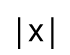
<style>
.page{position:relative;width:70px;height:55px;background:#ffffff}
.page>*{position:absolute;margin:0}
.t1{font:31.8px "DroidSans";color:#000000}
</style>
<div class="page">
<p class="t1" style="left:18px;top:17px;width:36px;height:32px">|x|</p>
</div>
